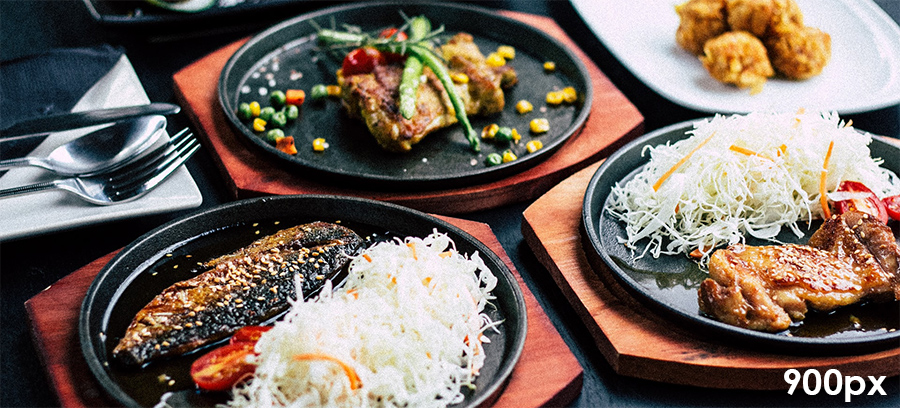
<style>
.page{position:relative;width:900px;height:408px}
.page>*{position:absolute;margin:0}
.t1{font:36px "CenturyGothic-Bold";color:#ffffff}
</style>
<div class="page">
<p class="t1" style="left:784px;top:369px;width:103px;height:33px">900px</p>
</div>
